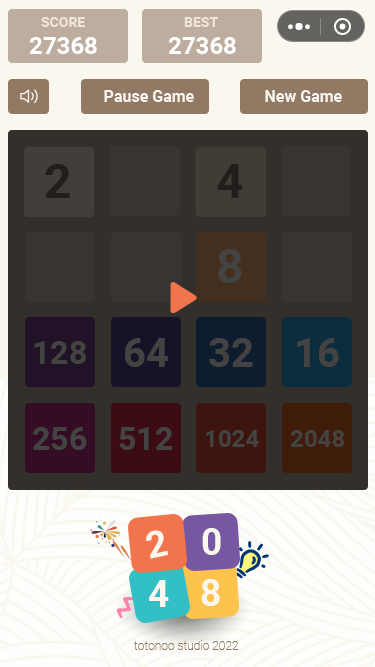
<style>
.page{position:relative;width:375px;height:667px;background:#332f2b}
.page>*{position:absolute;margin:0}
.t1{font:14px "Roboto-Bold";color:#f0e4d9}
.t2{font:24px "Roboto-Bold";color:#ffffff}
.t3{font:16px "Roboto-Bold";color:#f9f6f1}
.t4{font:48px "Roboto-Bold";color:#211e1b}
.t5{font:48px "Roboto-Bold";color:#434341}
.t6{font:32px "Roboto-Bold";color:#434341}
.t7{font:40px "Roboto-Bold";color:#434341}
.t8{font:24px "Roboto-Bold";color:#434341}
.t9{font:36.9px "Roboto-Bold";color:#faf8ee}
.t10{font:12px "Roboto-Thin";color:#927963}
</style>
<div class="page">
<p class="t1" style="left:41px;top:17px;width:44px;height:10px">SCORE</p>
<p class="t1" style="left:184px;top:17px;width:34px;height:10px">BEST</p>
<p class="t2" style="left:29px;top:37px;width:68px;height:17px">27368</p>
<p class="t2" style="left:168px;top:37px;width:68px;height:17px">27368</p>
<p class="t3" style="left:104px;top:90px;width:90px;height:12px">Pause Game</p>
<p class="t3" style="left:265px;top:90px;width:77px;height:12px">New Game</p>
<p class="t4" style="left:45px;top:164px;width:25px;height:34px">2</p>
<p class="t4" style="left:217px;top:164px;width:26px;height:34px">4</p>
<p class="t5" style="left:218px;top:249px;width:24px;height:34px">8</p>
<p class="t6" style="left:34px;top:341px;width:52px;height:23px">128</p>
<p class="t7" style="left:125px;top:338px;width:43px;height:29px">64</p>
<p class="t7" style="left:209px;top:338px;width:44px;height:29px">32</p>
<p class="t7" style="left:297px;top:338px;width:42px;height:29px">16</p>
<p class="t6" style="left:33px;top:427px;width:54px;height:23px">256</p>
<p class="t6" style="left:119px;top:427px;width:54px;height:23px">512</p>
<p class="t8" style="left:206px;top:430px;width:53px;height:17px">1024</p>
<p class="t8" style="left:290px;top:430px;width:55px;height:17px">2048</p>
<p class="t9" style="left:146px;top:530px;width:23px;height:29px;rotate:-12deg">2</p>
<p class="t9" style="left:202px;top:528px;width:19px;height:27px">0</p>
<p class="t9" style="left:149px;top:580px;width:20px;height:27px">4</p>
<p class="t9" style="left:201px;top:579px;width:19px;height:27px">8</p>
<p class="t10" style="left:134px;top:640px;width:105px;height:10px">totonoo studio 2022</p>
</div>
